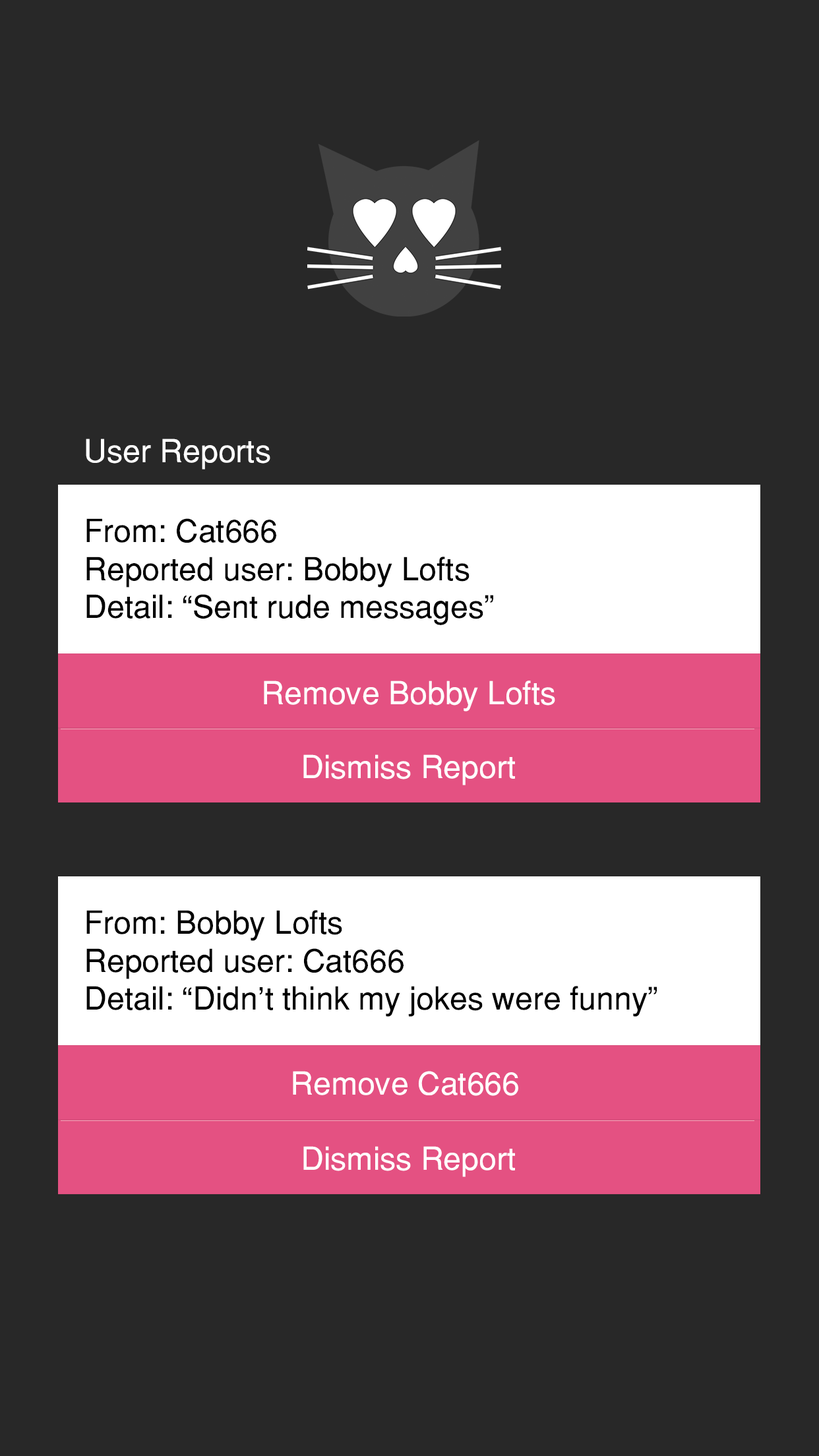
<style>
.page{position:relative;width:819px;height:1456px;background:#282828}
.page>*{position:absolute;margin:0}
.t1{font:31.7px "Helvetica-Normal";color:#ffffff}
.t2{font:31.7px "Helvetica-Normal";color:#000000}
</style>
<div class="page">
<p class="t1" style="left:86px;top:439px;width:184px;height:31px">User Reports</p>
<p class="t2" style="left:86px;top:518px;width:407px;height:107px">From: Cat666<br>Reported user: Bobby Lofts<br>Detail: “Sent rude messages”</p>
<p class="t1" style="left:264px;top:681px;width:291px;height:31px">Remove Bobby Lofts</p>
<p class="t1" style="left:303px;top:754px;width:212px;height:31px">Dismiss Report</p>
<p class="t2" style="left:86px;top:910px;width:571px;height:107px">From: Bobby Lofts<br>Reported user: Cat666<br>Detail: “Didn’t think my jokes were funny”</p>
<p class="t1" style="left:293px;top:1071px;width:225px;height:25px">Remove Cat666</p>
<p class="t1" style="left:303px;top:1146px;width:212px;height:31px">Dismiss Report</p>
</div>
